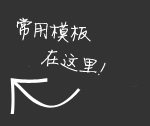
<style>
.page{position:relative;width:150px;height:126px;background:#333333}
.page>*{position:absolute;margin:0}
.t1{font:24px "FZJLJW--GB1-0";color:#ffffff}
</style>
<div class="page">
<p class="t1" style="left:16px;top:17px;width:75px;height:26px;rotate:5deg">常用模板</p>
<p class="t1" style="left:41px;top:49px;width:65px;height:27px;rotate:11deg">在这里！</p>
</div>
